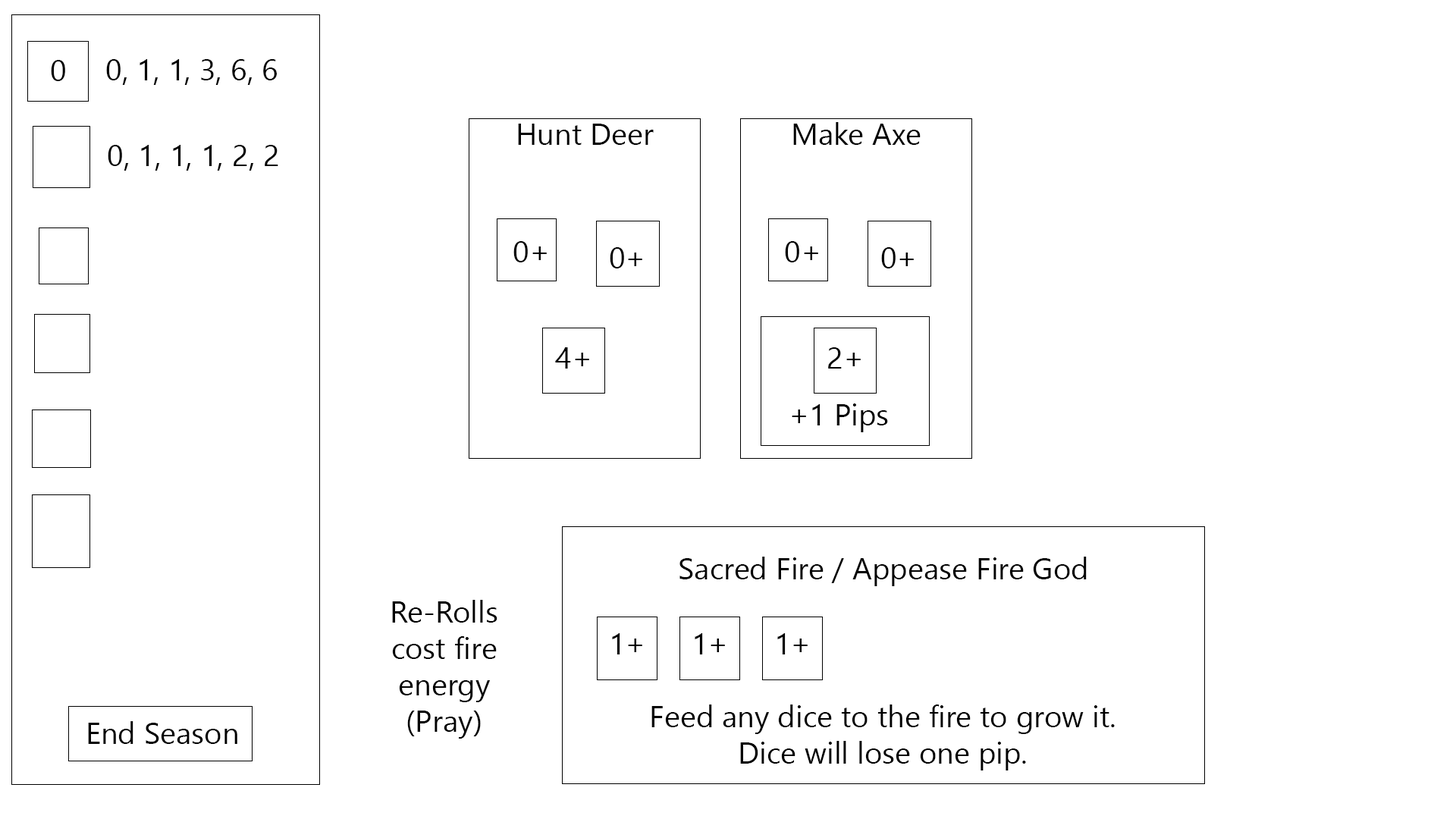
<style>
.page{position:relative;width:1456px;height:819px;background:#ffffff}
.page>*{position:absolute;margin:0}
.t1{font:30.3px "SegoeUISymbol";color:#000000}
</style>
<div class="page">
<p class="t1" style="left:51px;top:60px;width:14px;height:21px">0</p>
<p class="t1" style="left:106px;top:59px;width:171px;height:26px">0, 1, 1, 3, 6, 6</p>
<p class="t1" style="left:518px;top:124px;width:136px;height:21px">Hunt Deer</p>
<p class="t1" style="left:793px;top:122px;width:128px;height:23px">Make Axe</p>
<p class="t1" style="left:108px;top:145px;width:170px;height:26px">0, 1, 1, 1, 2, 2</p>
<p class="t1" style="left:513px;top:241px;width:34px;height:21px">0+</p>
<p class="t1" style="left:785px;top:241px;width:33px;height:21px">0+</p>
<p class="t1" style="left:610px;top:247px;width:32px;height:21px">0+</p>
<p class="t1" style="left:881px;top:247px;width:33px;height:21px">0+</p>
<p class="t1" style="left:555px;top:347px;width:34px;height:22px">4+</p>
<p class="t1" style="left:828px;top:347px;width:33px;height:22px">2+</p>
<p class="t1" style="left:792px;top:403px;width:96px;height:29px">+1 Pips</p>
<p class="t1" style="left:679px;top:557px;width:408px;height:29px">Sacred Fire / Appease Fire God</p>
<p class="t1" style="left:392px;top:600px;width:105px;height:139px;text-align:center">Re-Rolls<br>cost fire<br>energy<br>(Pray)</p>
<p class="t1" style="left:612px;top:633px;width:30px;height:21px">1+</p>
<p class="t1" style="left:695px;top:633px;width:30px;height:21px">1+</p>
<p class="t1" style="left:777px;top:633px;width:31px;height:21px">1+</p>
<p class="t1" style="left:651px;top:704px;width:464px;height:66px;text-align:center">Feed any dice to the fire to grow it.<br>Dice will lose one pip.</p>
<p class="t1" style="left:88px;top:721px;width:149px;height:23px">End Season</p>
</div>
